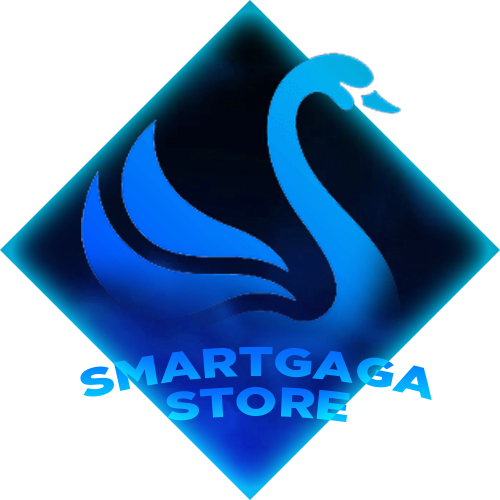
<style>
.page{position:relative;width:500px;height:500px;background:#ffffff}
.page>*{position:absolute;margin:0}
.t1{font:40.8px "GothamBlack"}
</style>
<div class="page">
<p class="t1" style="left:80px;top:346px;width:352px;height:55px">SMARTGAGA</p>
<p class="t1" style="left:166px;top:386px;width:184px;height:37px">STORE</p>
</div>
